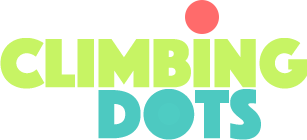
<style>
.page{position:relative;width:307px;height:140px;background:#ffffff}
.page>*{position:absolute;margin:0}
.t1{font:72px "Phosphate-Solid";color:#c7f464}
.t2{font:72px "Phosphate-Solid";color:#4dc9c1}
</style>
<div class="page">
<p class="t1" style="left:0px;top:38px;width:307px;height:51px">Climbing</p>
<p class="t2" style="left:98px;top:89px;width:163px;height:51px">Dots</p>
</div>
